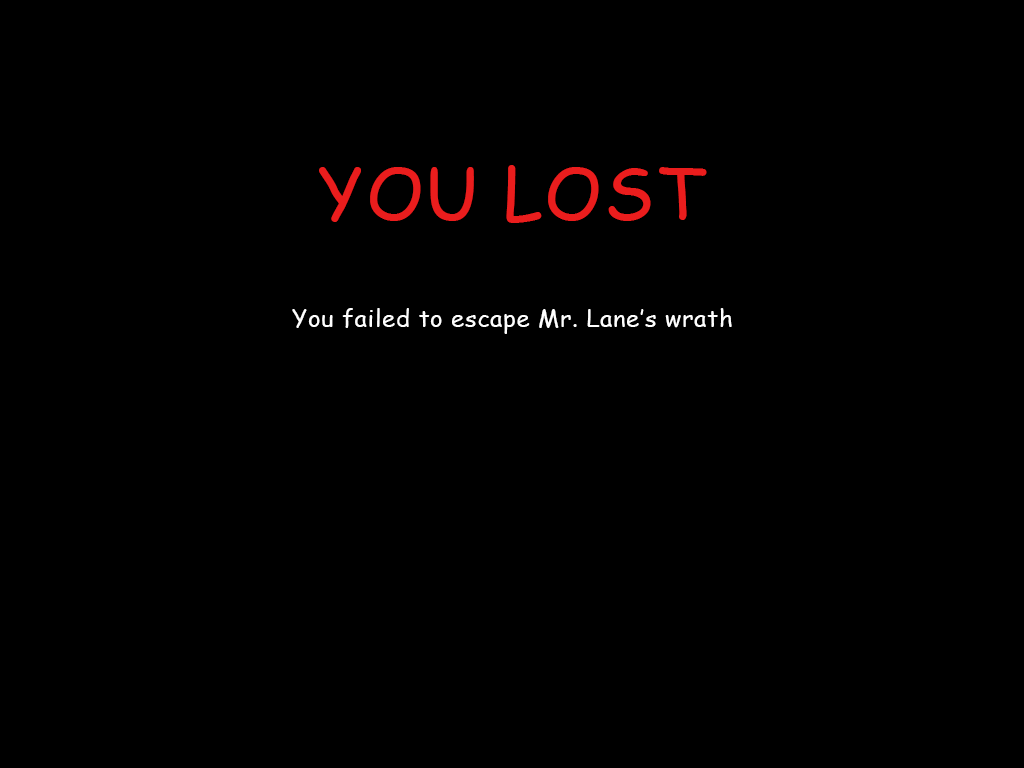
<style>
.page{position:relative;width:1024px;height:768px;background:#000000}
.page>*{position:absolute;margin:0}
.t1{font:72px "ComicSansMS";letter-spacing:0.025em;color:#ea1d1d}
.t2{font:24px "ComicSansMS";letter-spacing:0.025em;color:#fefefe}
</style>
<div class="page">
<p class="t1" style="left:319px;top:165px;width:388px;height:58px">YOU LOST</p>
<p class="t2" style="left:292px;top:308px;width:440px;height:26px">You failed to escape Mr. Lane’s wrath</p>
</div>
